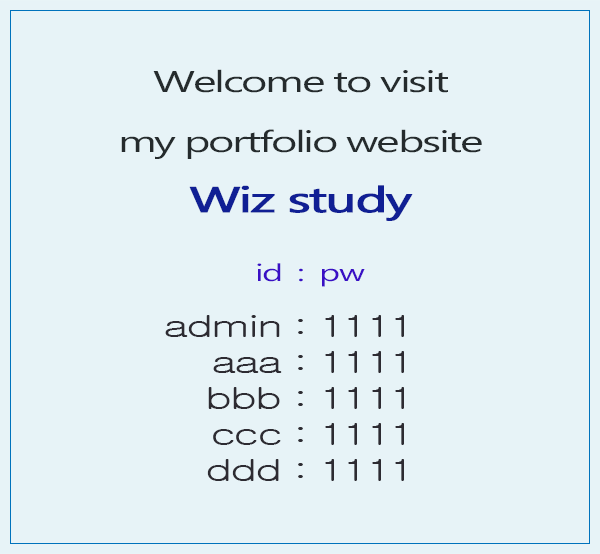
<style>
.page{position:relative;width:600px;height:554px;background:#e7f3f7}
.page>*{position:absolute;margin:0}
.t1{font:30px/60px "Ebrima";letter-spacing:-0.05em;color:#252b2d;scale:1.5 1}
.t2{font:36px/60px "Ebrima";letter-spacing:-0.05em;color:#101f94;font-weight:bold;scale:1.5 1}
.t3{font:24px "Ebrima";letter-spacing:-0.05em;color:#3a0fc5;scale:1.5 1}
.t4{font:30px/36px "Gulim";letter-spacing:-0.05em;color:#2d2b32;scale:1.5 1}
</style>
<div class="page">
<p class="t1" style="left:121px;top:69px;width:361px;height:152px;text-align:center">Welcome to visit<br>my portfolio website<br><span class="t2">Wiz study</span></p>
<p class="t3" style="left:257px;top:263px;width:108px;height:24px">id  :  pw</p>
<p class="t4" style="left:165px;top:315px;width:239px;height:166px;text-align:right">admin : 1111<br>aaa : 1111<br>bbb : 1111<br>ccc : 1111<br>ddd : 1111</p>
</div>
